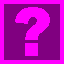
<style>
.page{position:relative;width:64px;height:64px;background:#800080}
.page>*{position:absolute;margin:0}
.t1{font:66.7px "Arial-Black";color:#ff00ff}
</style>
<div class="page">
<p class="t1" style="left:15px;top:7px;width:35px;height:49px">?</p>
</div>
